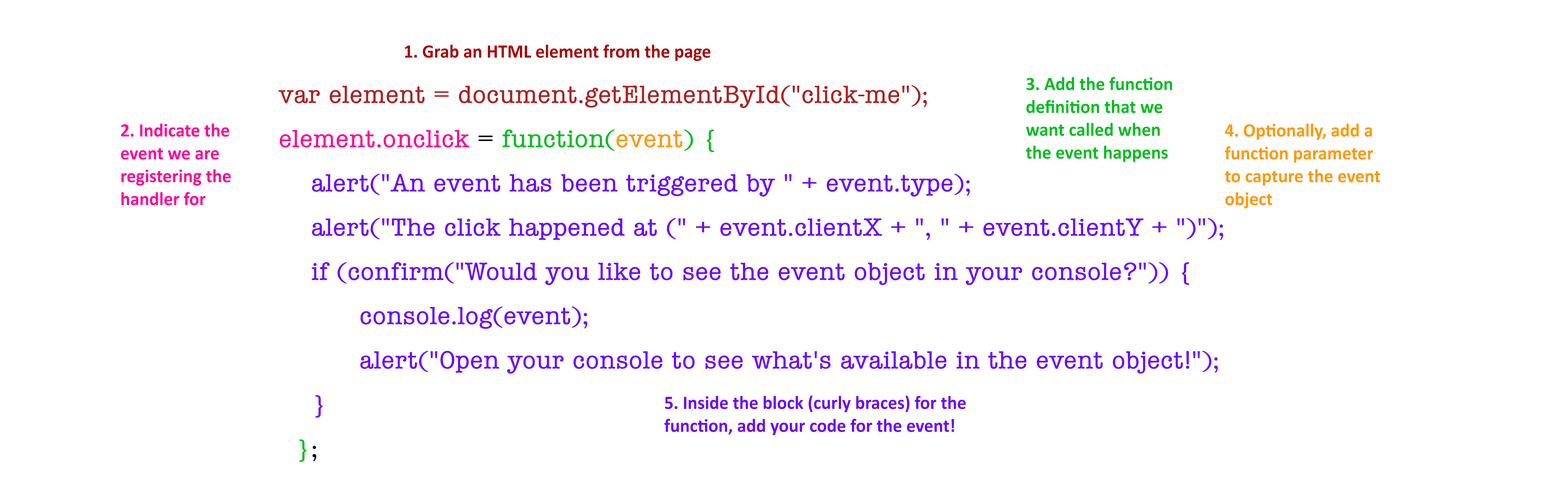
<style>
.page{position:relative;width:1568px;height:488px;background:#ffffff}
.page>*{position:absolute;margin:0}
.t1{font:19.1px "Calibri-Bold";color:#ab0000;scale:0.97 1}
.t2{font:19.1px "Calibri-Bold";color:#00bf1f;scale:0.97 1}
.t3{font:26px/44.3px "AmericanTypewriter-Condensed";color:#6e03ff;scale:1.24 1}
.t4{font:26px/44.3px "AmericanTypewriter-Condensed";color:#b12020;scale:1.24 1}
.t5{font:26px/44.3px "AmericanTypewriter-Condensed";color:#ff0099;scale:1.24 1}
.t6{font:26px/44.3px "AmericanTypewriter-Condensed";color:#000000;scale:1.24 1}
.t7{font:26px/44.3px "AmericanTypewriter-Condensed";color:#00bf1f;scale:1.24 1}
.t8{font:26px/44.3px "AmericanTypewriter-Condensed";color:#ff9900;scale:1.24 1}
.t9{font:19.1px "Calibri-Bold";color:#ff0099;scale:0.97 1}
.t10{font:19.1px "Calibri-Bold";color:#ff9900;scale:0.97 1}
.t11{font:19.1px "Calibri-Bold";color:#6d01ff;scale:0.97 1}
</style>
<div class="page">
<p class="t1" style="left:405px;top:45px;width:305px;height:16px">1. Grab an HTML element from the page</p>
<p class="t2" style="left:1026px;top:77px;width:146px;height:85px">3. Add the function definition that we want called when the event happens</p>
<p class="t3" style="left:278px;top:85px;width:945px;height:377px"><span class="t4">var element = document.getElementById("click-me");<br></span><span class="t5">element.onclick </span><span class="t6">= </span><span class="t7">function(</span><span class="t8">event</span><span class="t7">) {<br>    </span>alert("An event has been triggered by " + event.type);<br>    alert("The click happened at (" + event.clientX + ", " + event.clientY + ")");<br>    if (confirm("Would you like to see the event object in your console?")) {<br>          console.log(event);<br>          alert("Open your console to see what's available in the event object!");<br>    }<br><span class="t7">  }</span><span class="t6">;</span></p>
<p class="t9" style="left:121px;top:123px;width:110px;height:82px">2. Indicate the event we are registering the handler for</p>
<p class="t10" style="left:1225px;top:123px;width:155px;height:86px">4. Optionally, add a function parameter <br>to capture the event object</p>
<p class="t11" style="left:664px;top:396px;width:302px;height:40px">5. Inside the block (curly braces) for the function, add your code for the event!</p>
</div>
